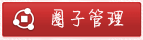
<style>
.page{position:relative;width:143px;height:40px}
.page>*{position:absolute;margin:0}
.t1{font:19.2px "-";color:#ffffff}
</style>
<div class="page">
<p class="t1" style="left:51px;top:9px;width:73px;height:19px">圈子管理</p>
</div>
